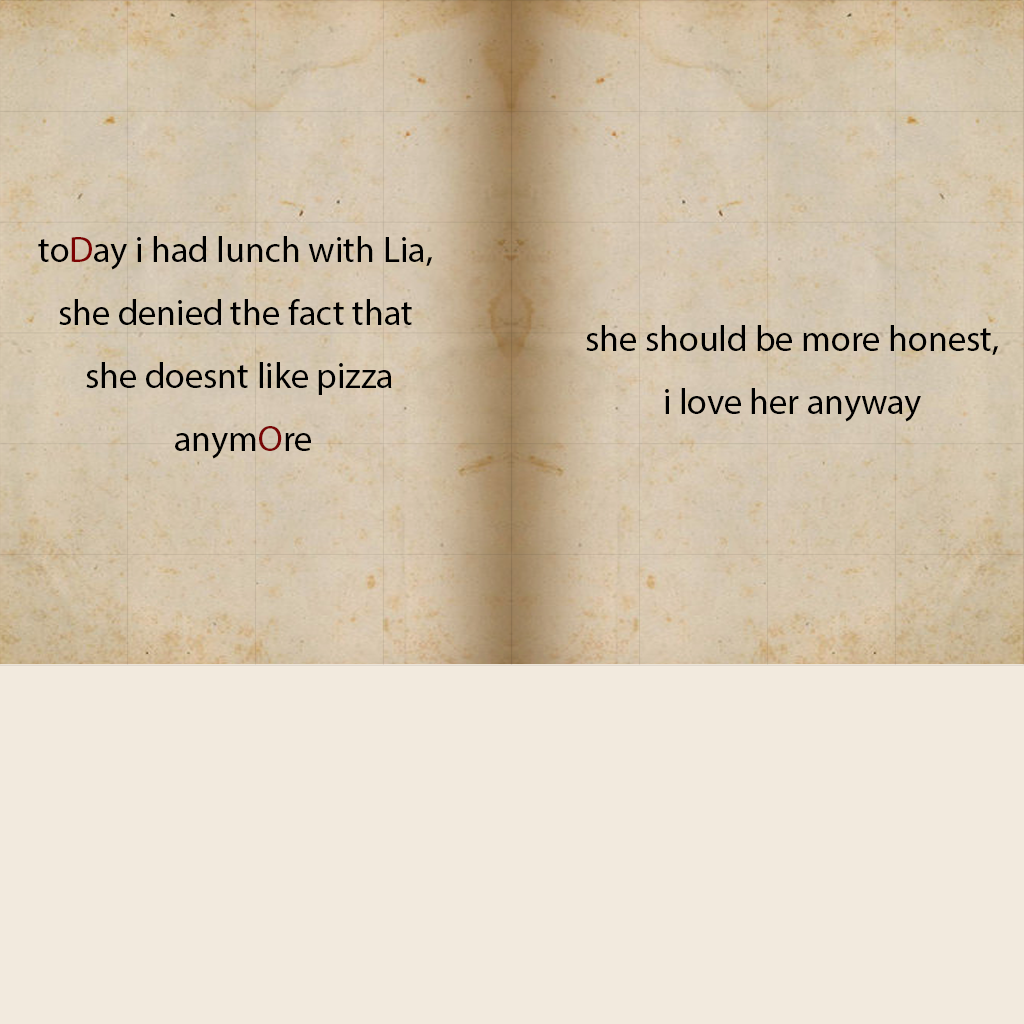
<style>
.page{position:relative;width:1024px;height:1024px;background:#f2eade}
.page>*{position:absolute;margin:0}
.t1{font:36px "MyriadPro-Regular";color:#000000}
.t2{font:36px "MyriadPro-Regular";color:#7c0202}
.t3{font:36px "MyriadPro-Regular";color:#790606}
</style>
<div class="page">
<p class="t1" style="left:38px;top:236px;width:394px;height:223px;text-align:center">to<span class="t2">D</span>ay i had lunch with Lia, <br>she denied the fact that <br>she doesnt like pizza<br> anym<span class="t3">O</span>re</p>
<p class="t1" style="left:586px;top:325px;width:412px;height:97px;text-align:center">she should be more honest,<br>i love her anyway</p>
</div>
